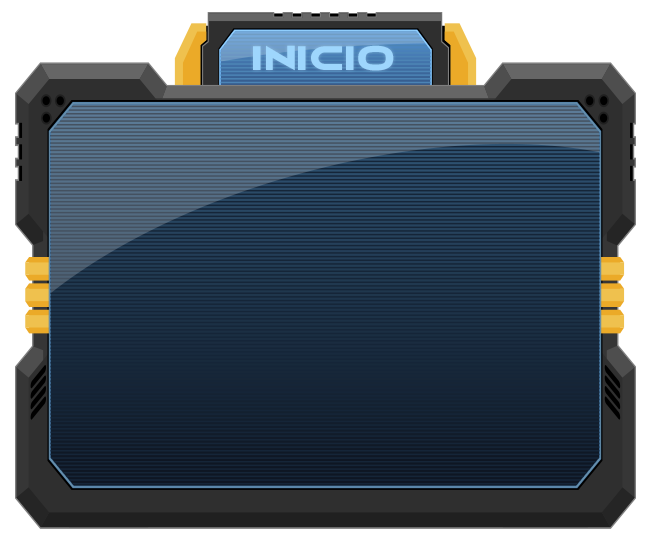
<style>
.page{position:relative;width:650px;height:545px}
.page>*{position:absolute;margin:0}
.t1{font:41.5px "elasisrg";letter-spacing:0.01em;color:#9ed6fd}
</style>
<div class="page">
<p class="t1" style="left:253px;top:45px;width:141px;height:26px">Inicio</p>
</div>
